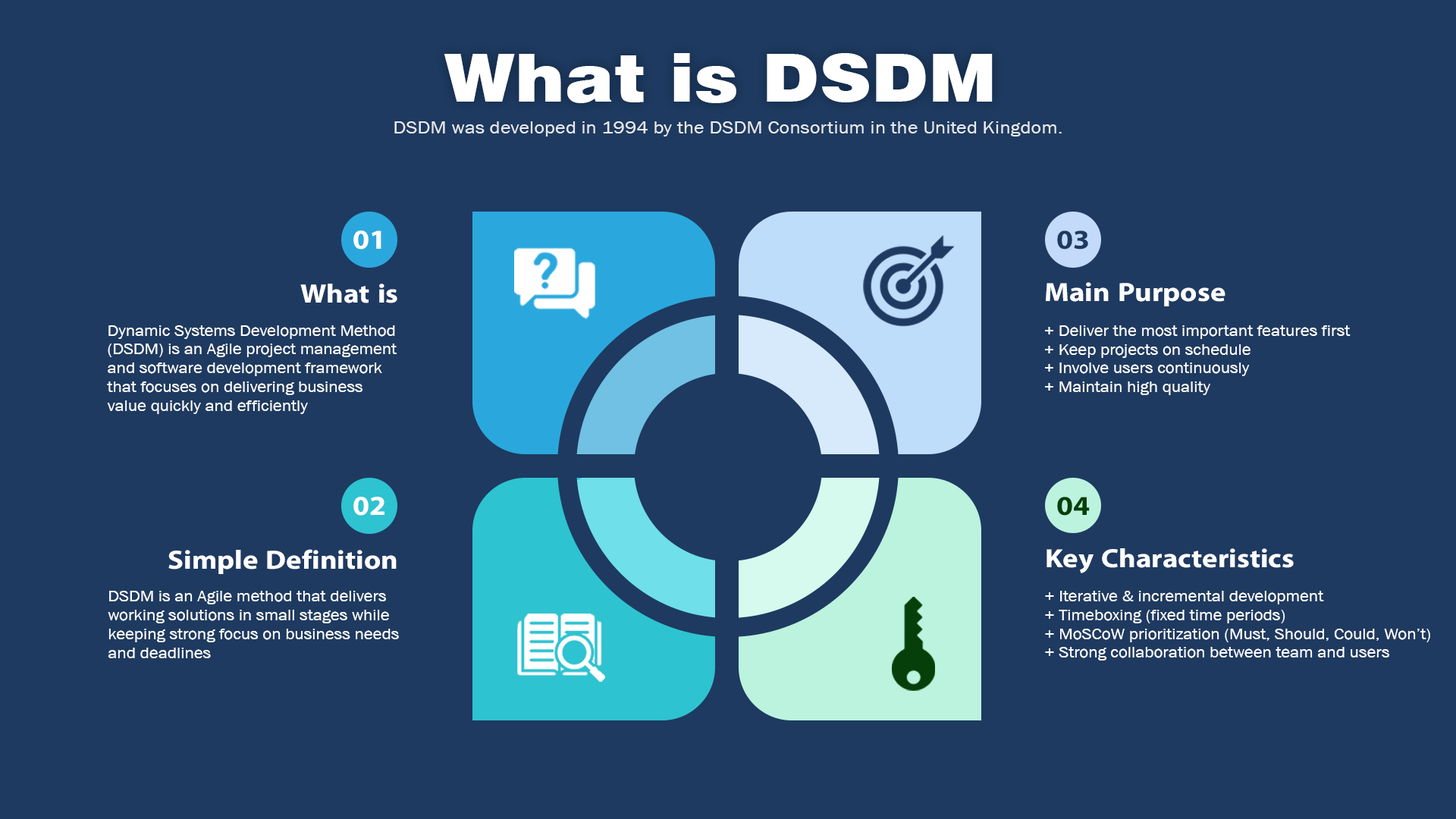
<style>
.page{position:relative;width:1456px;height:819px;background:#1e3a60}
.page>*{position:absolute;margin:0}
.t1{font:66px "Swiss721BT-Black";color:#ffffff;scale:1.1 1}
.t2{font:18.2px "AA-Khmer-AngDaunPov";color:#ffffff;scale:1.1 1}
.t3{font:27.5px "iKampuchea001_O'Chrov";color:#ffffff;scale:1.1 1}
.t4{font:27.3px "iKampuchea001_O'Chrov";color:#1e3a60;scale:1.11 1}
.t5{font:26.7px "iKampuchea001_O'Chrov";color:#ffffff;scale:1.1 1}
.t6{font:26.6px "iKampuchea001_O'Chrov";color:#ffffff;scale:1.11 1}
.t7{font:15.7px "AA-Khmer-AngDaunPov";color:#ffffff;scale:1.1 1}
.t8{font:15.6px "AA-Khmer-AngDaunPov";color:#ffffff;scale:1.11 1}
.t9{font:27.4px "iKampuchea001_O'Chrov";color:#ffffff;scale:1.1 1}
.t10{font:27.3px "iKampuchea001_O'Chrov";color:#063f09;scale:1.11 1}
.t11{font:26.6px "iKampuchea001_O'Chrov";color:#ffffff;scale:1.1 1}
.t12{font:26.5px "iKampuchea001_O'Chrov";color:#ffffff;scale:1.11 1}
.t13{font:15.6px "AA-Khmer-AngDaunPov";color:#ffffff;scale:1.1 1}
</style>
<div class="page">
<p class="t1" style="left:444px;top:53px;width:549px;height:50px">What is DSDM</p>
<p class="t2" style="left:394px;top:121px;width:668px;height:15px;opacity:0.86">DSDM was developed in 1994 by the DSDM Consortium in the United Kingdom.</p>
<p class="t3" style="left:353px;top:231px;width:28px;height:18px">01</p>
<p class="t4" style="left:1057px;top:231px;width:31px;height:18px">03</p>
<p class="t5" style="left:300px;top:284px;width:97px;height:19px">What is</p>
<p class="t6" style="left:1046px;top:282px;width:179px;height:24px">Main Purpose</p>
<p class="t7" style="left:107px;top:325px;width:290px;height:89px">Dynamic Systems Development Method<br>(DSDM) is an Agile project management <br>and software development framework <br>that focuses on delivering business <br>value quickly and efficiently</p>
<p class="t8" style="left:1045px;top:325px;width:306px;height:70px">+ Deliver the most important features first<br>+ Keep projects on schedule<br>+ Involve users continuously<br>+ Maintain high quality</p>
<p class="t9" style="left:353px;top:497px;width:31px;height:19px">02</p>
<p class="t10" style="left:1057px;top:497px;width:33px;height:19px">04</p>
<p class="t11" style="left:168px;top:549px;width:229px;height:25px">Simple Definition</p>
<p class="t12" style="left:1046px;top:548px;width:248px;height:25px">Key Characteristics</p>
<p class="t13" style="left:108px;top:591px;width:291px;height:67px">DSDM is an Agile method that delivers<br>working solutions in small stages while<br>keeping strong focus on business needs <br>and deadlines</p>
<p class="t8" style="left:1045px;top:591px;width:385px;height:69px">+ Iterative &amp; incremental development<br>+ Timeboxing (fixed time periods)<br>+ MoSCoW prioritization (Must, Should, Could, Won’t)<br>+ Strong collaboration between team and users</p>
</div>
